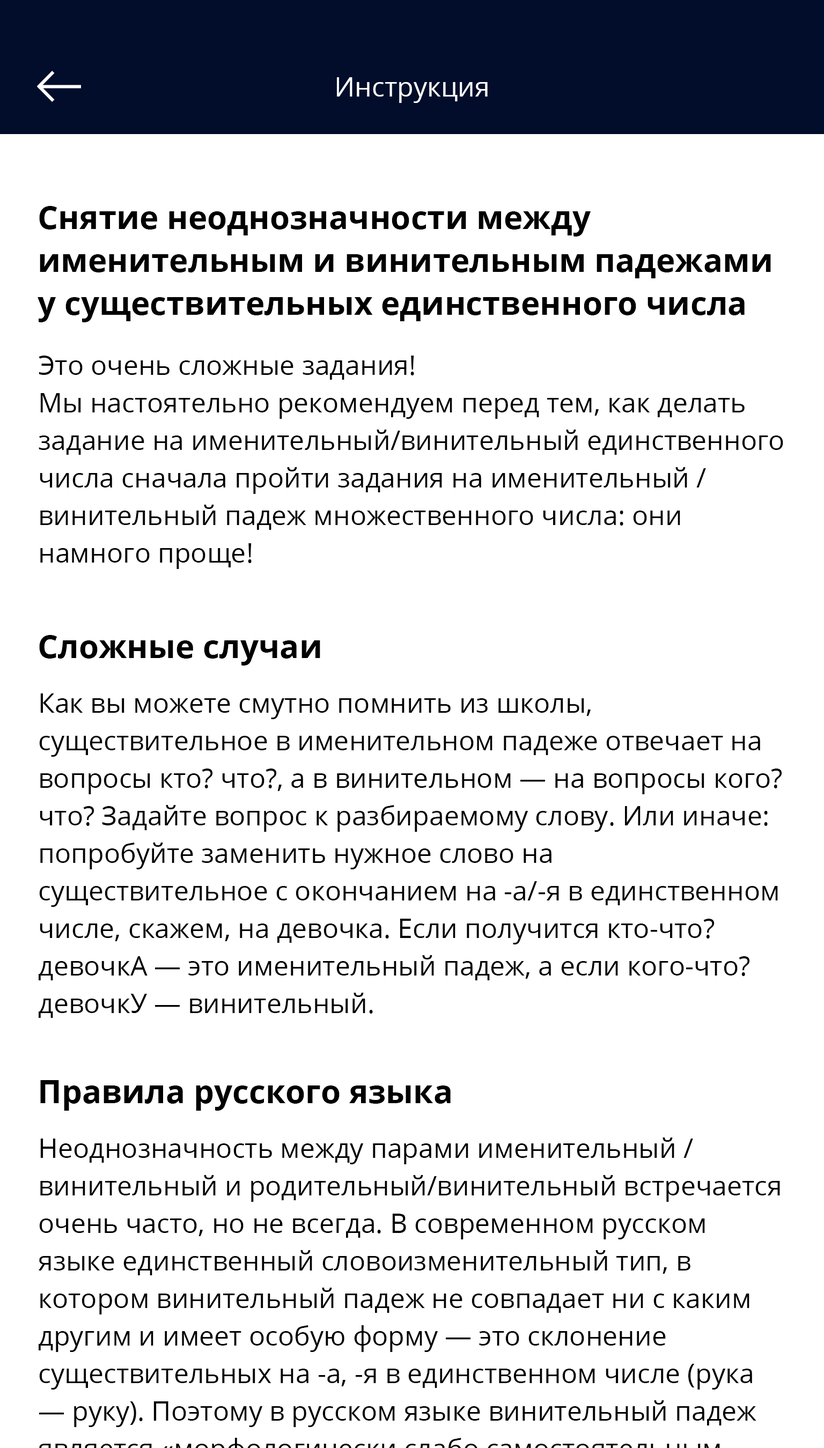
<style>
.page{position:relative;width:824px;height:1448px;background:#ffffff}
.page>*{position:absolute;margin:0}
.t1{font:26.8px "OpenSans";color:#ffffff}
.t2{font:32.2px/42.9px "OpenSans-Bold";color:#000000}
.t3{font:26.8px/37.5px "OpenSans";color:#000000}
.t4{font:32.2px "OpenSans-Bold";color:#000000}
</style>
<div class="page">
<p class="t1" style="left:337px;top:77px;width:150px;height:26px">Инструкция</p>
<p class="t2" style="left:38px;top:206px;width:733px;height:116px">Снятие неоднозначности между именительным и винительным падежами у существительных единственного числа</p>
<p class="t3" style="left:39px;top:356px;width:744px;height:213px">Это очень сложные задания! <br>Мы настоятельно рекомендуем перед тем, как делать задание на именительный/винительный единственного числа сначала пройти задания на именительный / винительный падеж множественного числа: они намного проще!</p>
<p class="t4" style="left:39px;top:635px;width:281px;height:30px">Сложные случаи</p>
<p class="t3" style="left:39px;top:693px;width:743px;height:325px">Как вы можете смутно помнить из школы, существительное в именительном падеже отвечает на вопросы кто? что?, а в винительном — на вопросы кого? что? Задайте вопрос к разбираемому слову. Или иначе: попробуйте заменить нужное слово на существительное с окончанием на -а/-я в единственном числе, скажем, на девочка. Если получится кто-что? девочкА — это именительный падеж, а если кого-что? девочкУ — винительный.</p>
<p class="t4" style="left:40px;top:1080px;width:410px;height:31px">Правила русского языка</p>
</div>
